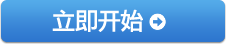
<style>
.page{position:relative;width:226px;height:44px}
.page>*{position:absolute;margin:0}
.t1{font:24px "LiHeiPro";letter-spacing:-0.05em;color:#ffffff}
</style>
<div class="page">
<p class="t1" style="left:52px;top:9px;width:91px;height:23px">立即开始</p>
</div>
